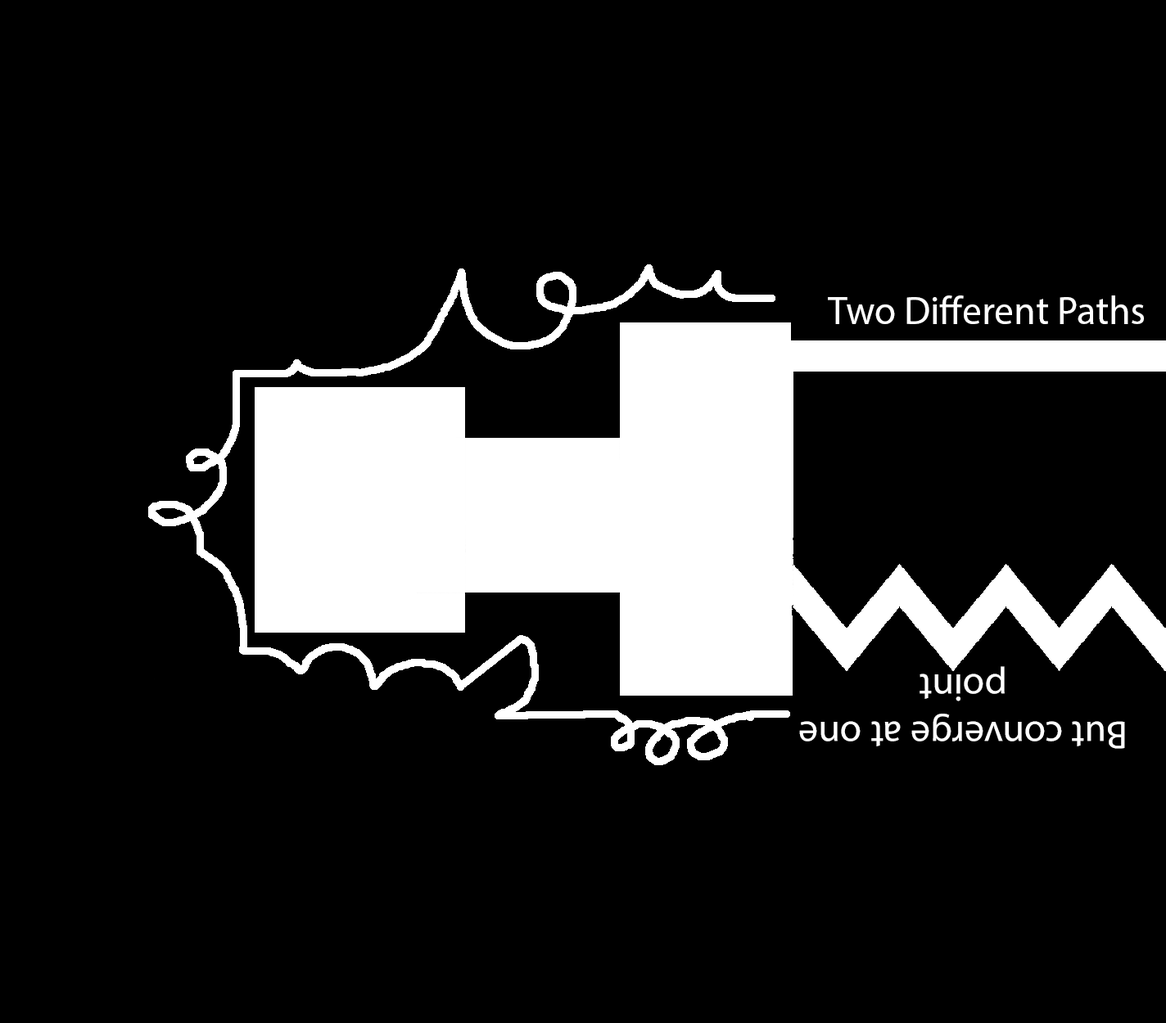
<style>
.page{position:relative;width:1166px;height:1023px;background:#000000}
.page>*{position:absolute;margin:0}
.t1{font:39.3px "MyriadPro-Regular";color:#ffffff}
.t2{font:39.3px "MyriadPro-Regular";color:#000000}
</style>
<div class="page">
<p class="t1" style="left:806px;top:295px;width:337px;height:29px"><span class="t2">T</span>Two Different Paths</p>
<p class="t1" style="left:799px;top:666px;width:326px;height:83px;rotate:180deg">But converge at one point</p>
</div>
